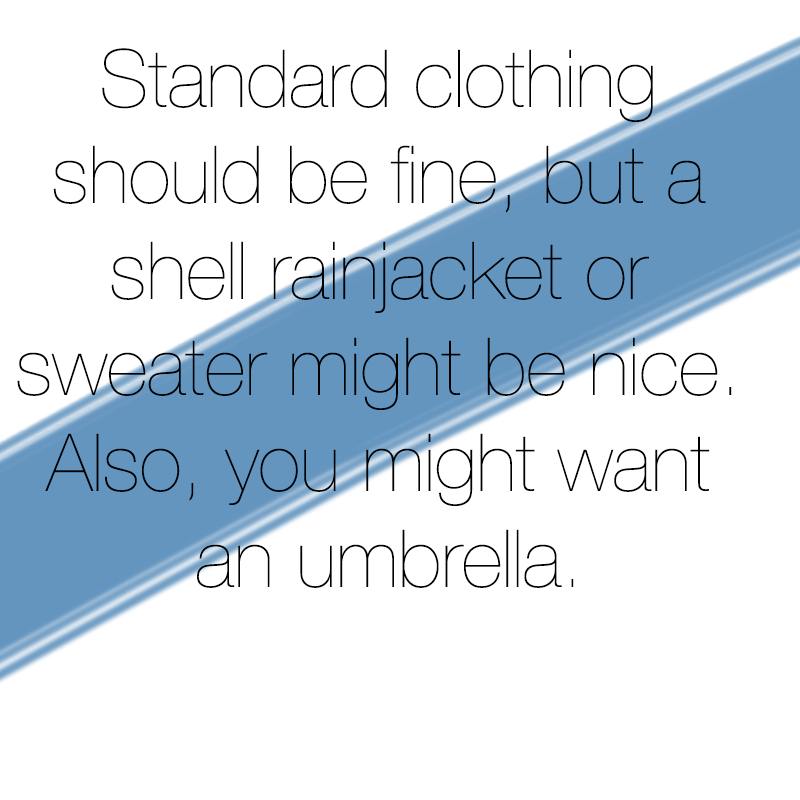
<style>
.page{position:relative;width:800px;height:800px;background:#ffffff}
.page>*{position:absolute;margin:0}
.t1{font:80px "HelveticaNeue-UltraLight";color:#000000}
</style>
<div class="page">
<p class="t1" style="left:17px;top:48px;width:715px;height:540px;text-align:center">Standard clothing <br>should be fine, but a <br>shell rainjacket or <br>sweater might be nice. <br>Also, you might want <br>an umbrella.</p>
</div>
